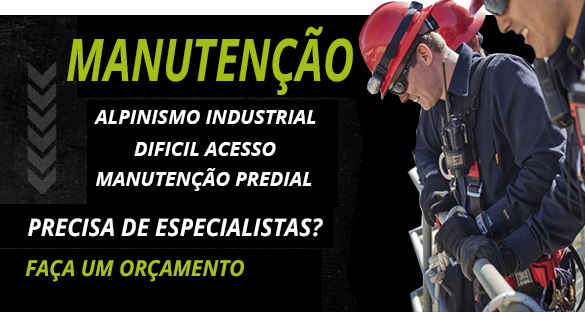
<style>
.page{position:relative;width:585px;height:312px;background:#000000}
.page>*{position:absolute;margin:0}
.t1{font:58.8px "OpenSans-BoldItalic";color:#a3c011;text-transform:uppercase;scale:0.73 1}
.t2{font:19.9px "OpenSans-BoldItalic";color:#ffffff;text-transform:uppercase}
.t3{font:24.2px "OpenSans-BoldItalic";color:#ffffff;text-transform:uppercase;scale:0.95 1}
.t4{font:22px "OpenSans-BoldItalic";color:#a6c311;text-transform:uppercase;scale:0.95 1}
</style>
<div class="page">
<p class="t1" style="left:67px;top:26px;width:286px;height:69px">MANUTENÇÃO</p>
<p class="t2" style="left:94px;top:110px;width:222px;height:14px">Alpinismo Industrial</p>
<p class="t2" style="left:134px;top:142px;width:142px;height:14px">Dificil acesso</p>
<p class="t2" style="left:96px;top:168px;width:216px;height:23px">manutenção predial</p>
<p class="t3" style="left:28px;top:218px;width:295px;height:19px">Precisa de especialistas?</p>
<p class="t4" style="left:25px;top:260px;width:219px;height:22px">FAÇA UM ORÇAMENTO</p>
</div>
